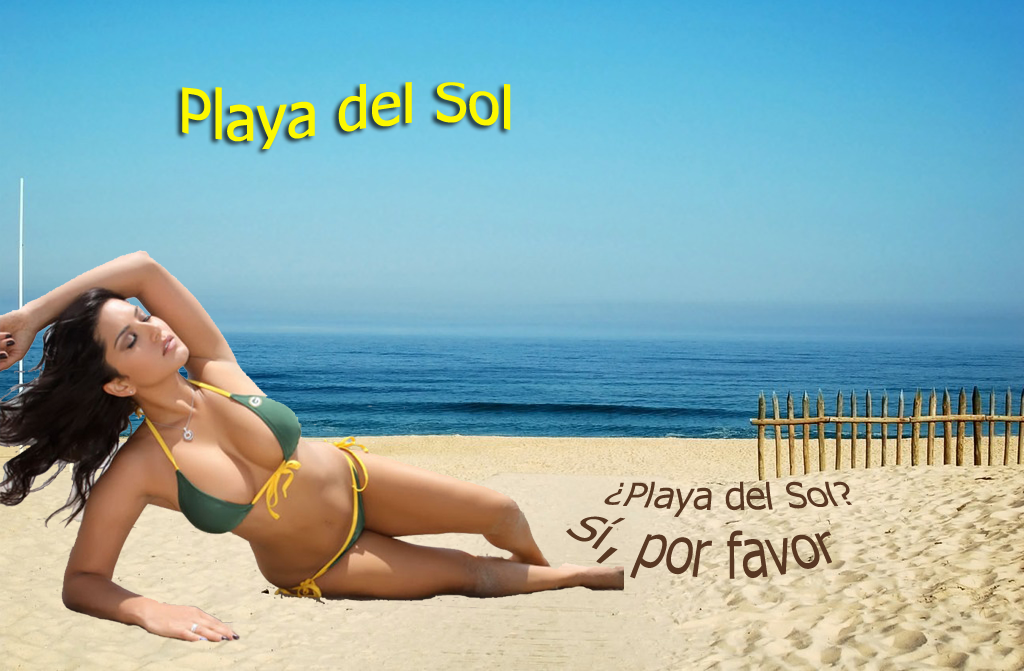
<style>
.page{position:relative;width:1024px;height:671px}
.page>*{position:absolute;margin:0}
.t1{font:60px "Tahoma";color:#fcf800}
.t2{font:36px "Tahoma";color:#583823}
</style>
<div class="page">
<p class="t1" style="left:182px;top:82px;width:329px;height:68px">Playa del Sol</p>
<p class="t2" style="left:566px;top:481px;width:286px;height:98px">¿Playa del Sol?<br>Sí, por favor</p>
</div>
